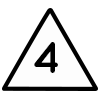
<style>
.page{position:relative;width:100px;height:100px;background:#ffffff}
.page>*{position:absolute;margin:0}
.t1{font:43.7px "QuicksandBold-Regular";color:#000000}
</style>
<div class="page">
<p class="t1" style="left:34px;top:42px;width:24px;height:31px">4</p>
</div>
